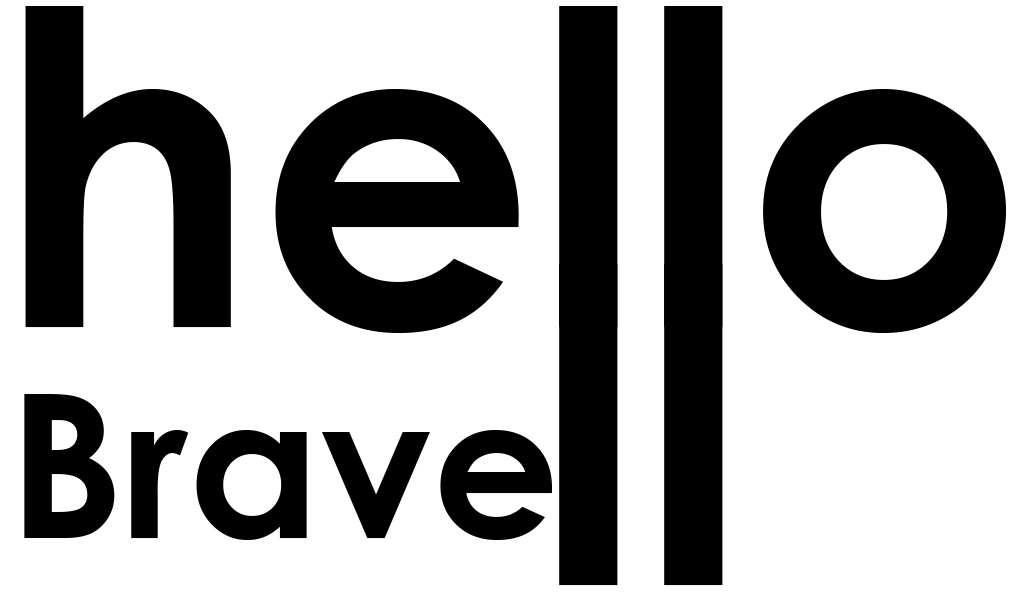
<style>
.page{position:relative;width:1031px;height:593px;background:#ffffff}
.page>*{position:absolute;margin:0}
.t1{font:435.5px "CenturyGothic-Bold";color:#000000}
.t2{font:200.2px "CenturyGothic-Bold";color:#000000}
</style>
<div class="page">
<p class="t1" style="left:25px;top:6px;width:981px;height:327px">hello</p>
<p class="t2" style="left:24px;top:394px;width:528px;height:146px">Brave</p>
</div>
